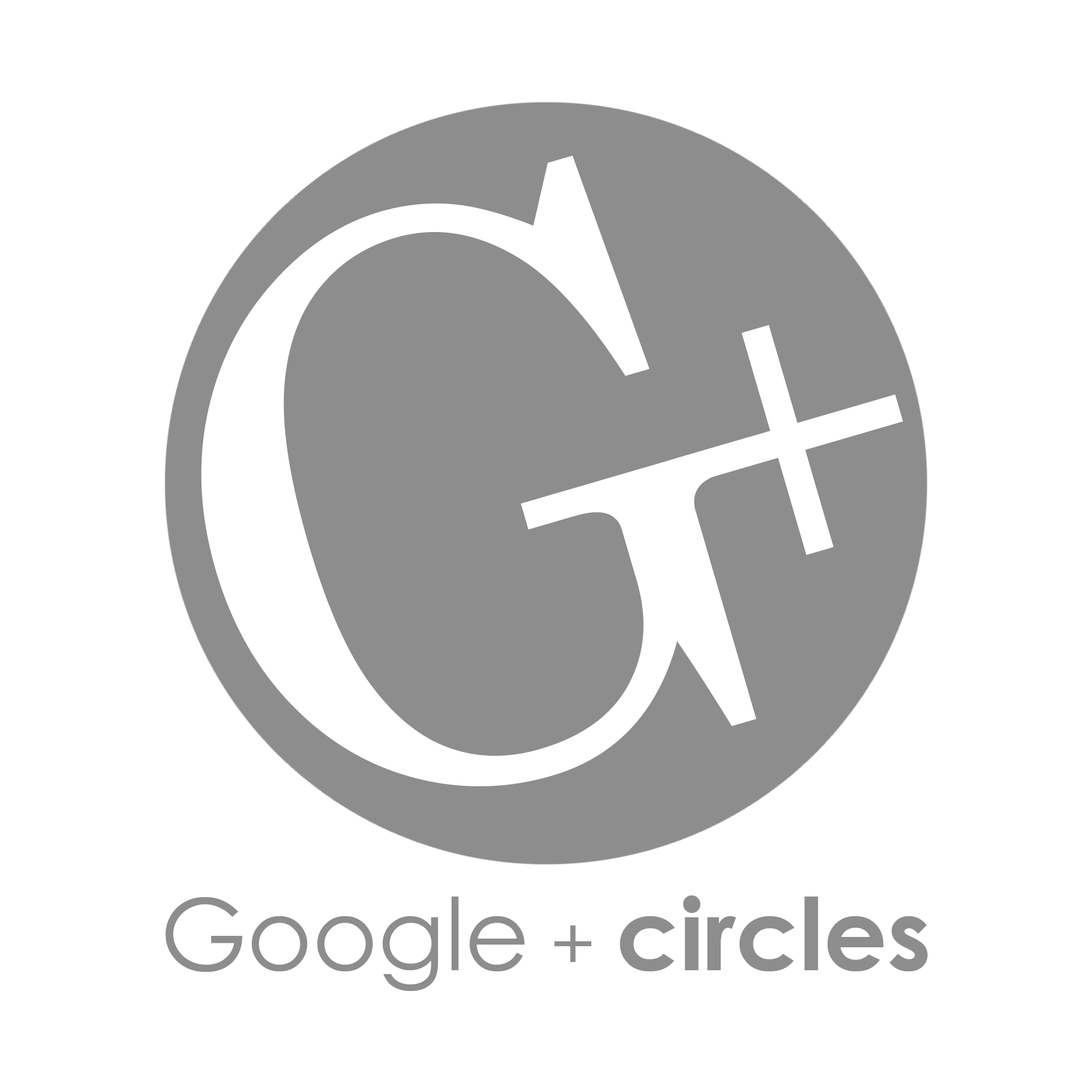
<style>
.page{position:relative;width:1092px;height:1092px;background:#ffffff}
.page>*{position:absolute;margin:0}
.t1{font:784.8px "Century";color:#ffffff}
.t2{font:429.9px "Century";color:#ffffff}
.t3{font:99.8px "CenturyGothic-Bold";color:#8d8d8d}
.t4{font:99.8px "CenturyGothic";color:#8d8d8d}
.t5{font:74.1px "CenturyGothic";color:#8d8d8d}
</style>
<div class="page">
<p class="t1" style="left:201px;top:156px;width:556px;height:630px;rotate:-16deg">G</p>
<p class="t2" style="left:672px;top:325px;width:231px;height:230px;rotate:-16deg">+</p>
<p class="t3" style="left:165px;top:895px;width:763px;height:96px"><span class="t4">Google</span><span class="t5"> + </span>circles</p>
</div>
